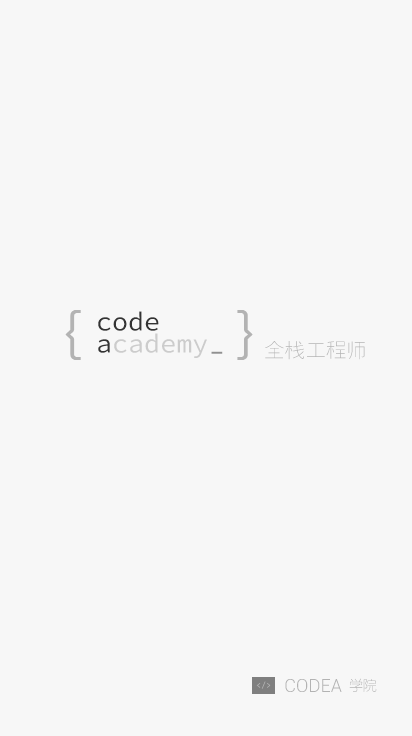
<style>
.page{position:relative;width:412px;height:736px;background:#f7f7f7}
.page>*{position:absolute;margin:0}
.t1{font:56.5px "AgencyFB-Reg";color:#b3b3b3}
.t2{font:26.7px/22px "SourceCodePro-Regular";color:#333333}
.t3{font:26.7px/22px "SourceCodePro-Regular";color:#cccccc}
.t4{font:20.6px "FZYXJW--GB1-0";color:#b3b3b3}
.t5{font:26.7px "SourceCodePro-Regular";color:#909090;scale:0.83 1}
.t6{font:13.7px "FZY1JW--GB1-0";color:#b3b3b3}
.t7{font:9.1px "Consolas";color:#b6b6b6}
.t8{font:18.3px "Roboto-Light";color:#b3b3b3}
</style>
<div class="page">
<p class="t1" style="left:65px;top:310px;width:16px;height:50px">{</p>
<p class="t2" style="left:98px;top:311px;width:109px;height:47px">code<br>a<span class="t3">cademy</span></p>
<p class="t1" style="left:237px;top:310px;width:16px;height:50px">}</p>
<p class="t4" style="left:265px;top:341px;width:100px;height:19px">全栈工程师</p>
<p class="t5" style="left:211px;top:351px;width:12px;height:3px">_</p>
<p class="t6" style="left:349px;top:678px;width:28px;height:14px">学院</p>
<p class="t7" style="left:256px;top:681px;width:15px;height:8px">&lt;/&gt;</p>
<p class="t8" style="left:285px;top:679px;width:57px;height:13px">CODEA</p>
</div>
